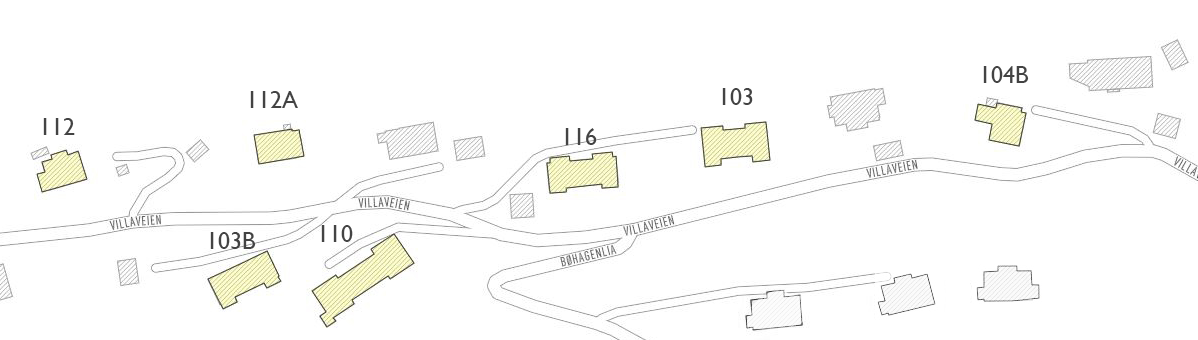
<style>
.page{position:relative;width:1198px;height:340px;background:#ffffff}
.page>*{position:absolute;margin:0}
.t1{font:24px "GillSansMT";color:#434343}
</style>
<div class="page">
<p class="t1" style="left:983px;top:66px;width:46px;height:17px">104B</p>
<p class="t1" style="left:722px;top:88px;width:31px;height:17px">103</p>
<p class="t1" style="left:250px;top:91px;width:48px;height:17px">112A</p>
<p class="t1" style="left:43px;top:118px;width:32px;height:17px">112</p>
<p class="t1" style="left:565px;top:128px;width:32px;height:17px">116</p>
<p class="t1" style="left:210px;top:232px;width:46px;height:17px">103B</p>
<p class="t1" style="left:321px;top:225px;width:32px;height:17px">110</p>
</div>
